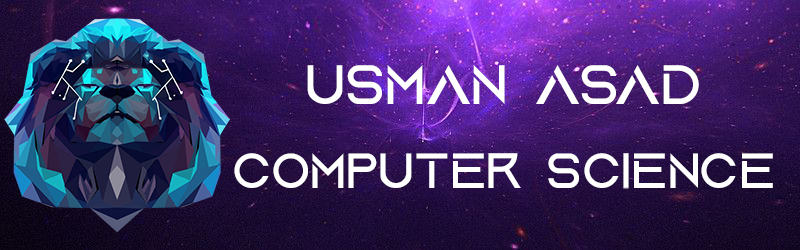
<style>
.page{position:relative;width:800px;height:250px}
.page>*{position:absolute;margin:0}
.t1{font:58.3px "AquireRegular";color:#ffffff}
.t2{font:52.1px "AquireRegular";color:#ffffff}
</style>
<div class="page">
<p class="t1" style="left:307px;top:65px;width:392px;height:39px">Usman Asad</p>
<p class="t2" style="left:234px;top:153px;width:539px;height:36px">Computer Science</p>
</div>
